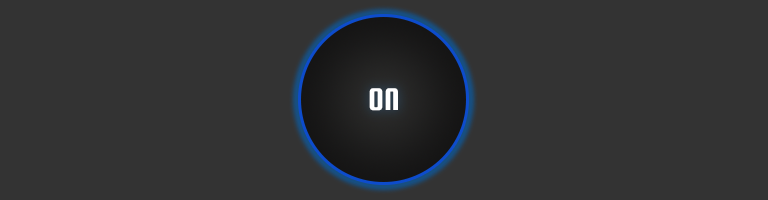
<style>
.page{position:relative;width:768px;height:200px;background:#333333}
.page>*{position:absolute;margin:0}
.t1{font:33.3px "SquadaOne-Regular";color:#ffffff}
</style>
<div class="page">
<p class="t1" style="left:369px;top:88px;width:29px;height:23px">ON</p>
</div>
